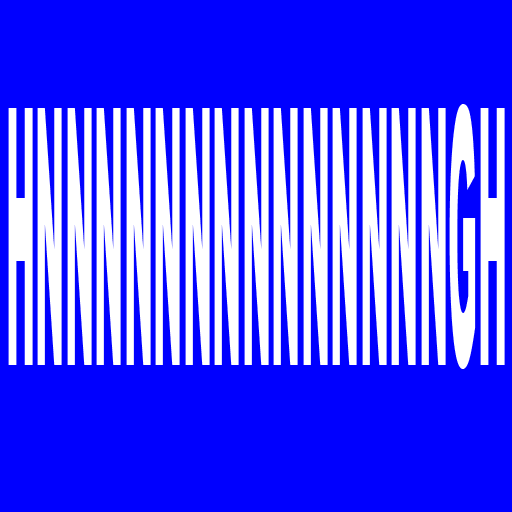
<style>
.page{position:relative;width:512px;height:512px;background:#0000ff}
.page>*{position:absolute;margin:0}
.t1{font:358.9px "Arial-Black";color:#ffffff;scale:0.1 1}
</style>
<div class="page">
<p class="t1" style="left:8px;top:104px;width:497px;height:265px">HNNNNNNNNNNNNNNGH</p>
</div>
